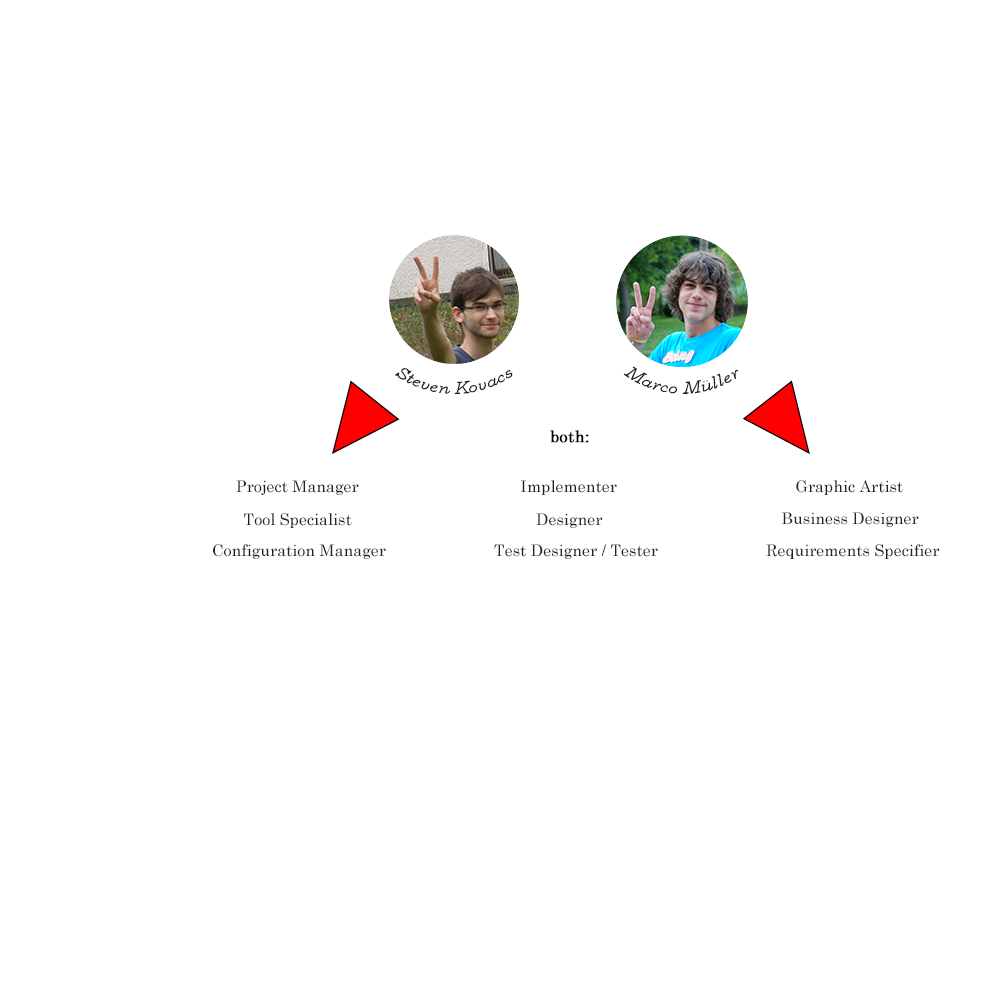
<style>
.page{position:relative;width:1000px;height:1000px;background:#ffffff}
.page>*{position:absolute;margin:0}
.t1{font:16px "CenturySchoolbook-Italic";color:#212121}
.t2{font:16px "CenturySchoolbook";color:#000000;font-weight:bold}
.t3{font:16px "CenturySchoolbook";color:#212121}
</style>
<div class="page">
<p class="t1" style="left:623px;top:366px;width:115px;height:28px">Marco Müller</p>
<p class="t1" style="left:394px;top:368px;width:119px;height:26px">Steven Kovacs</p>
<p class="t2" style="left:550px;top:430px;width:39px;height:13px">both:</p>
<p class="t3" style="left:236px;top:480px;width:123px;height:15px">Project Manager</p>
<p class="t3" style="left:521px;top:480px;width:96px;height:15px">Implementer</p>
<p class="t3" style="left:796px;top:480px;width:107px;height:15px">Graphic Artist</p>
<p class="t3" style="left:244px;top:513px;width:108px;height:15px">Tool Specialist</p>
<p class="t3" style="left:536px;top:513px;width:67px;height:15px">Designer</p>
<p class="t3" style="left:782px;top:512px;width:137px;height:15px">Business Designer</p>
<p class="t3" style="left:213px;top:544px;width:173px;height:15px">Configuration Manager</p>
<p class="t3" style="left:494px;top:544px;width:164px;height:15px">Test Designer / Tester</p>
<p class="t3" style="left:766px;top:544px;width:174px;height:15px">Requirements Specifier</p>
</div>
